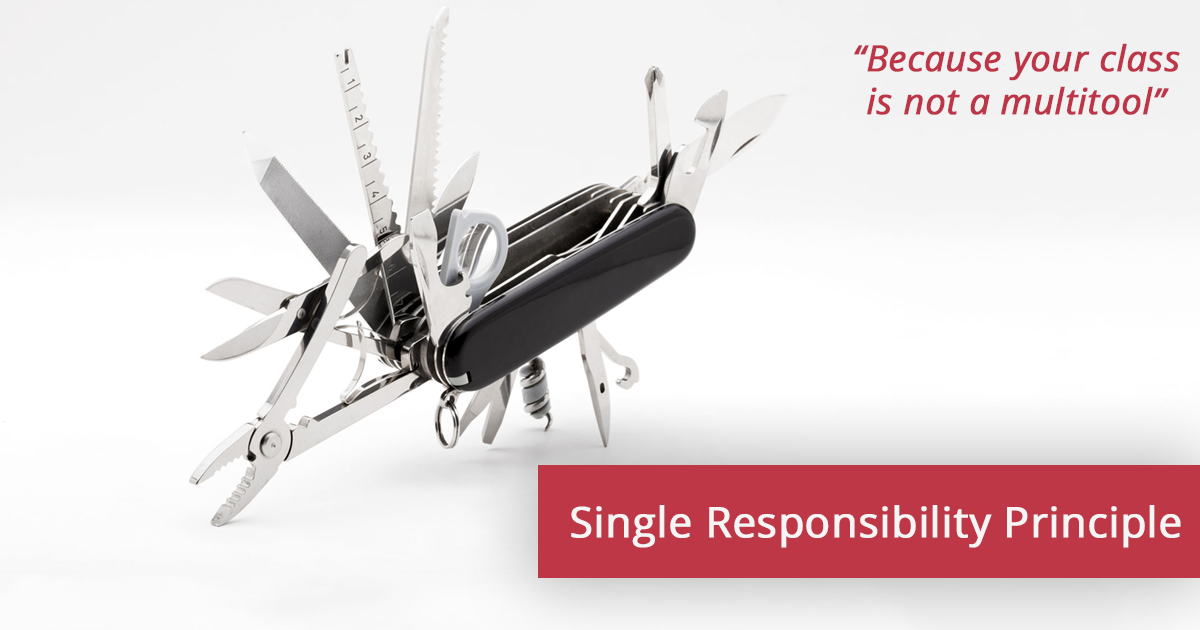
<style>
.page{position:relative;width:1200px;height:630px}
.page>*{position:absolute;margin:0}
.t1{font:36px "OpenSans-Italic";color:#bd3647;font-weight:bold}
.t2{font:42px "OpenSans";color:#f5f5f5;font-weight:bold}
</style>
<div class="page">
<p class="t1" style="left:854px;top:43px;width:326px;height:72px;text-align:center">“Because your class<br>is not a multitool”</p>
<p class="t2" style="left:571px;top:505px;width:610px;height:43px">Single Responsibility Principle</p>
</div>
